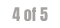
<style>
.page{position:relative;width:60px;height:28px;background:#ffffff}
.page>*{position:absolute;margin:0}
.t1{font:16px "Anton-Regular";color:#a5a1a0}
</style>
<div class="page">
<p class="t1" style="left:12px;top:7px;width:36px;height:15px">4 of 5</p>
</div>
